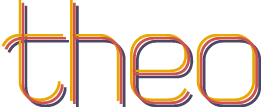
<style>
.page{position:relative;width:267px;height:107px;background:#ffffff}
.page>*{position:absolute;margin:0}
.t1{font:125px "SweetConfusion-Light";color:#e7a800}
.t2{font:125px "SweetConfusion-Light";color:#cf5151}
.t3{font:125px "SweetConfusion-Light";color:#4b4867}
</style>
<div class="page">
<p class="t1" style="left:1px;top:0px;width:254px;height:101px">theo</p>
<p class="t2" style="left:4px;top:2px;width:254px;height:102px">theo</p>
<p class="t3" style="left:7px;top:5px;width:254px;height:102px">theo</p>
</div>
